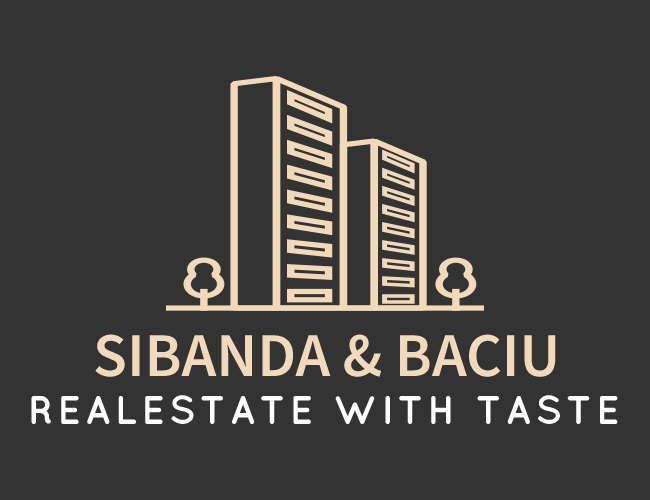
<style>
.page{position:relative;width:650px;height:500px;background:#333333}
.page>*{position:absolute;margin:0}
.t1{font:62.2px "SourceSansRoman-Semibold";color:#f2d9bb}
.t2{font:40px "Quicksand-Bold";letter-spacing:0.1em;color:#ffffff}
</style>
<div class="page">
<p class="t1" style="left:95px;top:334px;width:461px;height:43px">SIBANDA &amp; BACIU</p>
<p class="t2" style="left:31px;top:395px;width:587px;height:29px">REALESTATE WITH TASTE</p>
</div>
